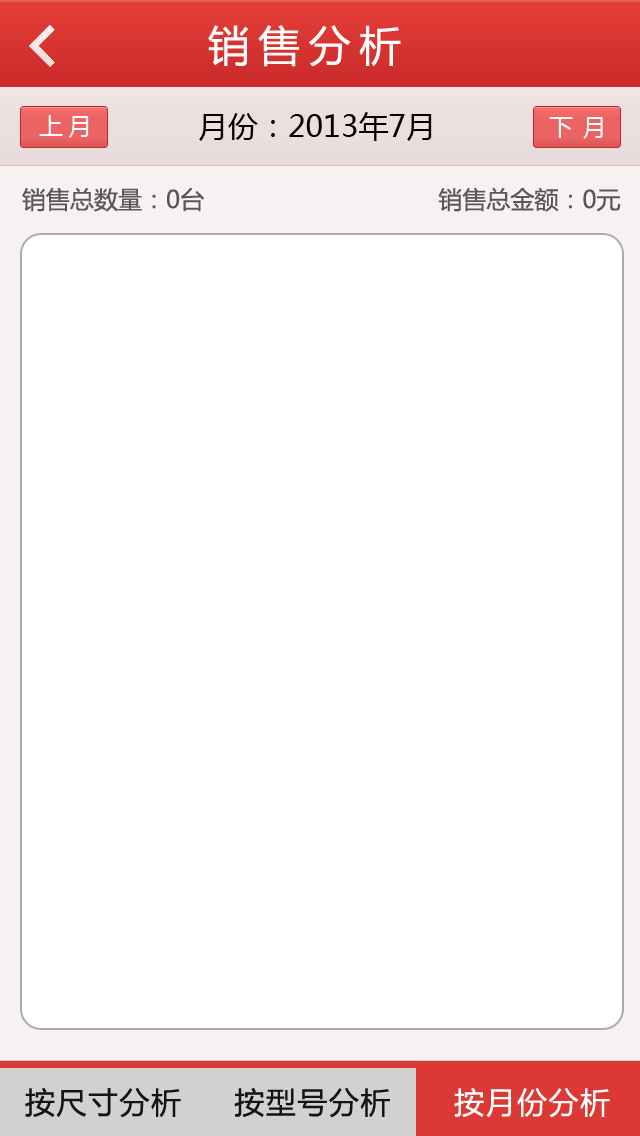
<style>
.page{position:relative;width:640px;height:1136px;background:#ffffff}
.page>*{position:absolute;margin:0}
.t1{font:42px "MicrosoftYaHei";letter-spacing:0.2em;color:#ffffff}
.t2{font:30px "MicrosoftYaHei";color:#000000}
.t3{font:24px "MicrosoftYaHei";letter-spacing:0.2em;color:#ffffff}
.t4{font:24px "MicrosoftYaHei";letter-spacing:0.05em;color:#ffffff}
.t5{font:24px "MicrosoftYaHei";color:#585858}
.t6{font:30px "MicrosoftYaHei";letter-spacing:0.05em;color:#141414}
.t7{font:30px "MicrosoftYaHei";letter-spacing:0.05em;color:#ffffff}
</style>
<div class="page">
<p class="t1" style="left:208px;top:25px;width:193px;height:42px">销售分析</p>
<p class="t2" style="left:199px;top:112px;width:233px;height:29px">月份：2013年7月</p>
<p class="t3" style="left:39px;top:115px;width:50px;height:23px">上月</p>
<p class="t4" style="left:549px;top:117px;width:54px;height:22px">下 月</p>
<p class="t5" style="left:22px;top:187px;width:599px;height:25px">销售总数量：0台                                 销售总金额：0元</p>
<p class="t6" style="left:25px;top:1087px;width:585px;height:31px">按尺寸分析     按型号分析    <span class="t7">  按月份分析</span></p>
</div>
